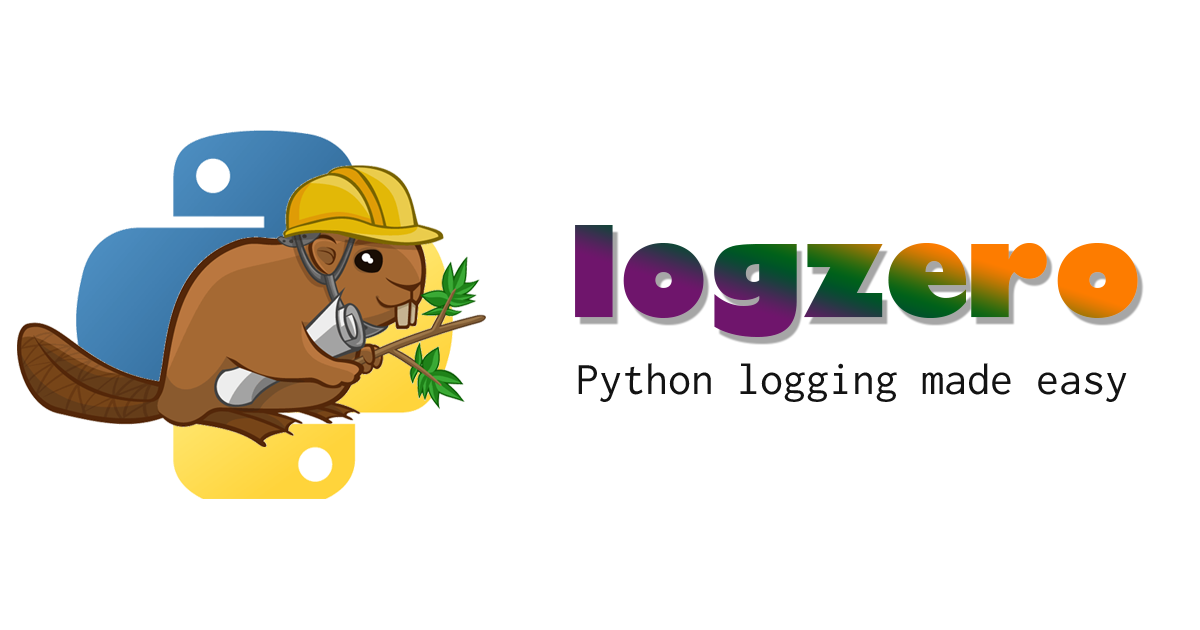
<style>
.page{position:relative;width:1200px;height:630px;background:#ffffff}
.page>*{position:absolute;margin:0}
.t1{font:124px "GillSans-UltraBold"}
.t2{font:46px "Inconsolata";color:#131313}
</style>
<div class="page">
<p class="t1" style="left:575px;top:225px;width:563px;height:112px">logzero</p>
<p class="t2" style="left:578px;top:363px;width:549px;height:39px">Python logging made easy</p>
</div>
